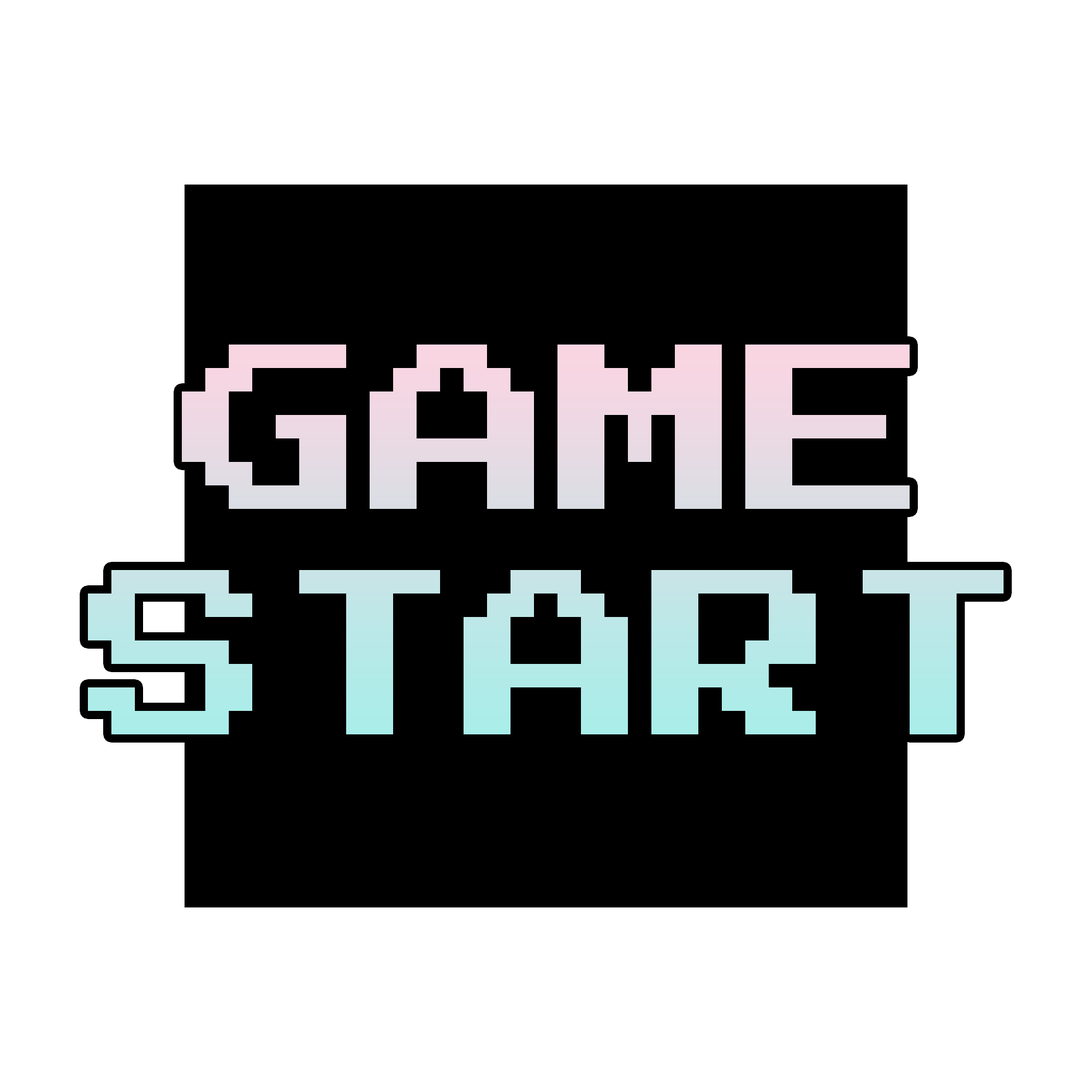
<style>
.page{position:relative;width:1092px;height:1092px;background:#ffffff}
.page>*{position:absolute;margin:0}
.t1{font:187.8px "PressStart2P-Regular"}
</style>
<div class="page">
<p class="t1" style="left:88px;top:345px;width:916px;height:389px;text-align:center">GAME<br>START</p>
</div>
